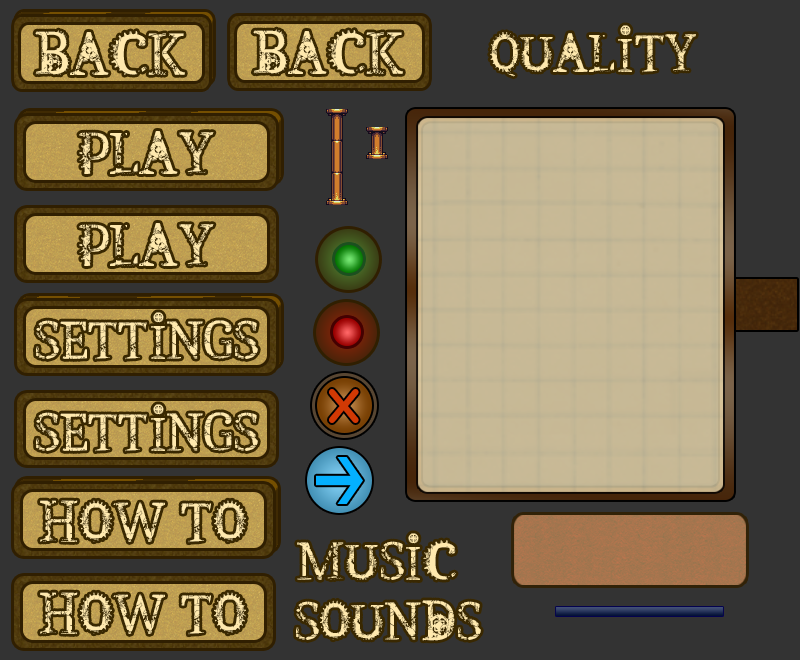
<style>
.page{position:relative;width:800px;height:660px;background:#333333}
.page>*{position:absolute;margin:0}
.t1{font:63px "SteampunkbyMartavanEck";color:#ffe9ae}
.t2{font:57px "SteampunkbyMartavanEck";color:#ffe9ae}
.t3{font:63px "OCRAStd";letter-spacing:0.01em;color:#d23904}
.t4{font:60px "SteampunkbyMartavanEck";color:#ffe9ae}
</style>
<div class="page">
<p class="t1" style="left:35px;top:30px;width:150px;height:45px">BACK</p>
<p class="t1" style="left:253px;top:29px;width:150px;height:45px">BACK</p>
<p class="t2" style="left:490px;top:25px;width:206px;height:52px">QUALITY</p>
<p class="t1" style="left:79px;top:131px;width:135px;height:43px">PLAY</p>
<p class="t1" style="left:79px;top:223px;width:135px;height:43px">PLAY</p>
<p class="t2" style="left:36px;top:312px;width:222px;height:48px">SETTINGS</p>
<p class="t3" style="left:329px;top:389px;width:30px;height:34px">x</p>
<p class="t2" style="left:36px;top:404px;width:222px;height:48px">SETTINGS</p>
<p class="t4" style="left:40px;top:500px;width:206px;height:43px">HOW TO</p>
<p class="t2" style="left:297px;top:533px;width:159px;height:47px">MUSIC</p>
<p class="t4" style="left:40px;top:592px;width:206px;height:43px">HOW TO</p>
<p class="t2" style="left:296px;top:600px;width:185px;height:41px">SOUNDS</p>
</div>
